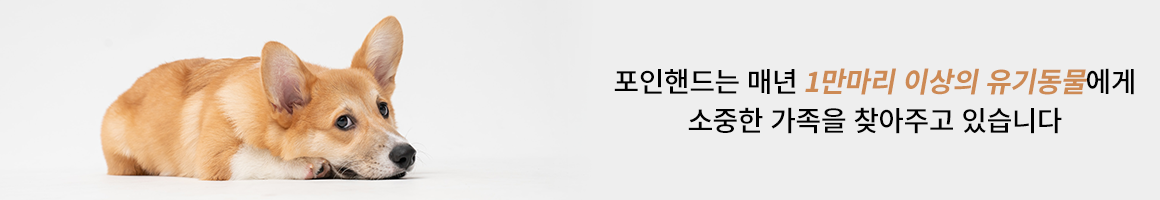
<style>
.page{position:relative;width:1160px;height:200px;background:#eeeeee}
.page>*{position:absolute;margin:0}
.t1{font:28px/39px "NotoSansKR-Medium";letter-spacing:-0.02em;color:#000000}
.t2{font:28px/39px "NotoSansKR-Bold";letter-spacing:-0.02em;color:#cd8a54;font-style:italic}
</style>
<div class="page">
<p class="t1" style="left:614px;top:68px;width:520px;height:66px;text-align:center">포인핸드는 매년 <span class="t2">1만마리 이상의 유기동물</span>에게<br>소중한 가족을 찾아주고 있습니다</p>
</div>
